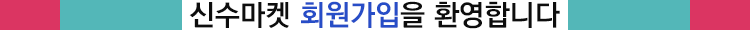
<style>
.page{position:relative;width:750px;height:30px;background:#53b7b8}
.page>*{position:absolute;margin:0}
.t1{font:29px "KoPubDotumBold";color:#0d0d0d}
.t2{font:29px "KoPubDotumBold";color:#274dc7}
</style>
<div class="page">
<p class="t1" style="left:189px;top:2px;width:100px;height:26px">신수마켓</p>
<p class="t2" style="left:301px;top:1px;width:97px;height:27px">회원가입</p>
<p class="t1" style="left:400px;top:1px;width:160px;height:28px">을 환영합니다</p>
</div>
